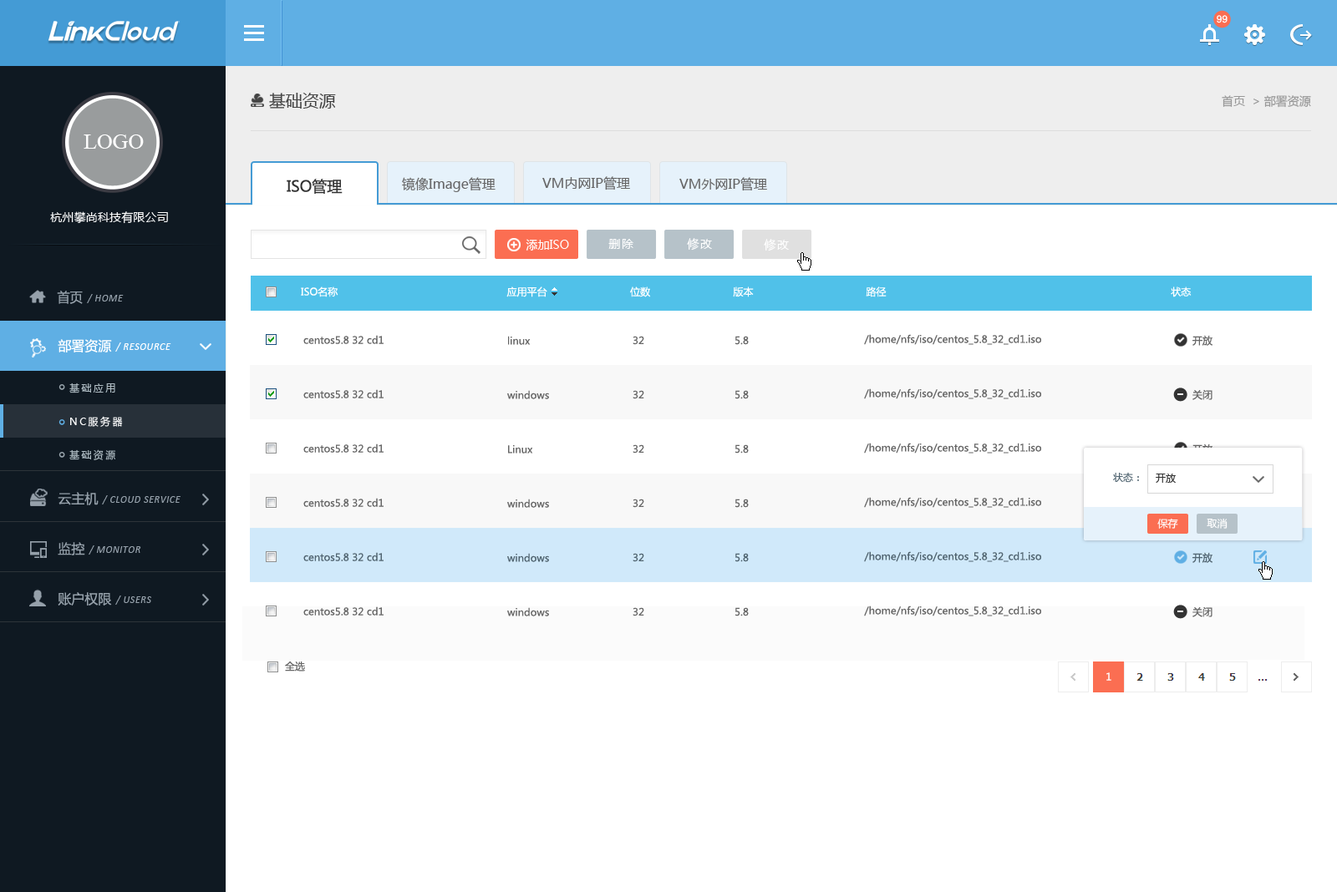
<style>
.page{position:relative;width:1337px;height:892px;background:#ffffff}
.page>*{position:absolute;margin:0}
.t1{font:10px "ArialMT";color:#ffffff}
.t2{font:16.7px "MicrosoftYaHei";color:#444444}
.t3{font:11.7px "MicrosoftYaHei";color:#999999}
.t4{font:21.7px "TimesNewRomanPSMT";color:#ffffff}
.t5{font:15px "MicrosoftYaHei";color:#333333}
.t6{font:13.4px "MicrosoftYaHei";color:#666666}
.t7{font:11.7px "MicrosoftYaHei";letter-spacing:0.01em;color:#ffffff}
.t8{font:11.7px "MicrosoftYaHei";color:#ffffff}
.t9{font:11.7px "MicrosoftYaHei";letter-spacing:0.1em;color:#ffffff}
.t10{font:13.4px "MicrosoftYaHei";color:#95a0aa;scale:0.96 1}
.t11{font:10px "MicrosoftYaHei";color:#ffffff}
.t12{font:10px "Calibri-Italic";letter-spacing:0.05em;color:#95a0aa}
.t13{font:13.4px "MicrosoftYaHei";color:#ffffff}
.t14{font:10px "MicrosoftYaHei";color:#666666}
.t15{font:10px "Calibri-Italic";letter-spacing:0.05em;text-transform:uppercase}
.t16{font:10px "Calibri-Italic";letter-spacing:0.05em}
.t17{font:10px "Calibri-Italic";letter-spacing:0.05em;color:#ffffff;text-transform:uppercase}
.t18{font:10px "Calibri-Italic";letter-spacing:0.05em;color:#ffffff}
.t19{font:10px/33.4px "MicrosoftYaHei";letter-spacing:0.2em;color:#ffffff}
.t20{font:10px/33.4px "MicrosoftYaHei";letter-spacing:0.2em;color:#b0bdc4}
.t21{font:10px "MicrosoftYaHei"}
.t22{font:10px "MicrosoftYaHei";color:#506470}
.t23{font:10px "MicrosoftYaHei";color:#333333}
.t24{font:13.4px "MicrosoftYaHei";color:#95a0aa}
.t25{font:10px "Calibri-Italic";letter-spacing:0.05em;color:#95a0aa;text-transform:uppercase}
.t26{font:10px "MicrosoftYaHei";color:#fffefe}
</style>
<div class="page">
<p class="t1" style="left:1216px;top:15px;width:11px;height:8px">99</p>
<p class="t2" style="left:269px;top:93px;width:67px;height:16px">基础资源</p>
<p class="t3" style="left:1221px;top:95px;width:90px;height:13px">首页  &gt; 部署资源</p>
<p class="t4" style="left:84px;top:134px;width:60px;height:15px">LOGO</p>
<p class="t5" style="left:287px;top:179px;width:55px;height:15px">ISO管理</p>
<p class="t6" style="left:402px;top:177px;width:93px;height:15px">镜像Image管理</p>
<p class="t6" style="left:542px;top:176px;width:88px;height:14px">VM内网IP管理</p>
<p class="t6" style="left:679px;top:177px;width:88px;height:14px">VM外网IP管理</p>
<p class="t7" style="left:50px;top:211px;width:118px;height:13px">杭州攀尚科技有限公司</p>
<p class="t8" style="left:525px;top:239px;width:44px;height:12px">添加ISO</p>
<p class="t9" style="left:608px;top:239px;width:25px;height:10px">删除</p>
<p class="t9" style="left:687px;top:238px;width:25px;height:13px">修改</p>
<p class="t9" style="left:764px;top:239px;width:25px;height:12px">修改</p>
<p class="t10" style="left:57px;top:291px;width:26px;height:13px">首页</p>
<p class="t11" style="left:301px;top:287px;width:890px;height:10px">ISO名称                                                         应用平台                            位数                            版本                                      路径                                                                                                状态</p>
<p class="t12" style="left:87px;top:294px;width:37px;height:9px">/ HOME</p>
<p class="t13" style="left:58px;top:339px;width:54px;height:14px">部署资源</p>
<p class="t14" style="left:303px;top:335px;width:80px;height:9px">centos5.8 32 cd1</p>
<p class="t14" style="left:508px;top:336px;width:22px;height:9px">linux</p>
<p class="t14" style="left:632px;top:336px;width:12px;height:9px">32</p>
<p class="t14" style="left:735px;top:336px;width:13px;height:9px">5.8</p>
<p class="t14" style="left:864px;top:334px;width:177px;height:11px">/home/nfs/iso/centos_5.8_32_cd1.iso</p>
<p class="t14" style="left:1192px;top:335px;width:20px;height:11px">开放</p>
<p class="t15" style="left:115px;top:343px;width:56px;height:10px"><span class="t16">/ </span>resource</p>
<p class="t17" style="left:115px;top:342px;width:56px;height:10px"><span class="t18">/ </span>resource</p>
<p class="t19" style="left:69px;top:383px;width:54px;height:77px"><span class="t20">基础应用<br></span>NC服务器<br><span class="t20">基础资源</span></p>
<p class="t14" style="left:303px;top:389px;width:80px;height:9px">centos5.8 32 cd1</p>
<p class="t14" style="left:864px;top:388px;width:177px;height:11px">/home/nfs/iso/centos_5.8_32_cd1.iso</p>
<p class="t14" style="left:1192px;top:389px;width:20px;height:11px">关闭</p>
<p class="t14" style="left:507px;top:390px;width:42px;height:9px">windows</p>
<p class="t14" style="left:632px;top:390px;width:12px;height:9px">32</p>
<p class="t14" style="left:735px;top:390px;width:13px;height:9px">5.8</p>
<p class="t14" style="left:303px;top:444px;width:80px;height:9px">centos5.8 32 cd1</p>
<p class="t14" style="left:508px;top:445px;width:25px;height:9px">Linux</p>
<p class="t14" style="left:632px;top:444px;width:12px;height:10px">32</p>
<p class="t14" style="left:735px;top:444px;width:13px;height:10px">5.8</p>
<p class="t14" style="left:864px;top:443px;width:177px;height:11px">/home/nfs/iso/centos_5.8_32_cd1.iso</p>
<p class="t21" style="left:1192px;top:444px;width:20px;height:10px">开放</p>
<p class="t22" style="left:1113px;top:472px;width:26px;height:11px">状态：</p>
<p class="t23" style="left:1155px;top:474px;width:20px;height:9px">开放</p>
<p class="t24" style="left:58px;top:492px;width:41px;height:13px">云主机</p>
<p class="t25" style="left:102px;top:495px;width:78px;height:10px"><span class="t12">/ </span>cloud service</p>
<p class="t14" style="left:303px;top:498px;width:80px;height:9px">centos5.8 32 cd1</p>
<p class="t14" style="left:864px;top:497px;width:177px;height:11px">/home/nfs/iso/centos_5.8_32_cd1.iso</p>
<p class="t14" style="left:507px;top:499px;width:42px;height:9px">windows</p>
<p class="t14" style="left:632px;top:499px;width:12px;height:9px">32</p>
<p class="t14" style="left:735px;top:499px;width:13px;height:9px">5.8</p>
<p class="t11" style="left:1157px;top:518px;width:21px;height:11px">保存</p>
<p class="t11" style="left:1206px;top:518px;width:21px;height:11px">取消</p>
<p class="t24" style="left:58px;top:542px;width:27px;height:14px">监控</p>
<p class="t25" style="left:89px;top:545px;width:52px;height:10px"><span class="t12">/ </span>monitor</p>
<p class="t22" style="left:303px;top:552px;width:80px;height:9px">centos5.8 32 cd1</p>
<p class="t22" style="left:507px;top:553px;width:42px;height:9px">windows</p>
<p class="t22" style="left:632px;top:553px;width:12px;height:9px">32</p>
<p class="t22" style="left:735px;top:553px;width:13px;height:9px">5.8</p>
<p class="t22" style="left:864px;top:551px;width:177px;height:11px">/home/nfs/iso/centos_5.8_32_cd1.iso</p>
<p class="t22" style="left:1192px;top:552px;width:20px;height:11px">开放</p>
<p class="t24" style="left:58px;top:592px;width:54px;height:14px">账户权限</p>
<p class="t25" style="left:115px;top:596px;width:36px;height:9px"><span class="t12">/ </span>users</p>
<p class="t14" style="left:864px;top:606px;width:177px;height:10px">/home/nfs/iso/centos_5.8_32_cd1.iso</p>
<p class="t14" style="left:303px;top:606px;width:80px;height:10px">centos5.8 32 cd1</p>
<p class="t14" style="left:507px;top:607px;width:42px;height:9px">windows</p>
<p class="t14" style="left:632px;top:607px;width:12px;height:9px">32</p>
<p class="t14" style="left:735px;top:607px;width:13px;height:9px">5.8</p>
<p class="t14" style="left:1192px;top:606px;width:20px;height:11px">关闭</p>
<p class="t14" style="left:285px;top:662px;width:20px;height:10px">全选</p>
<p class="t26" style="left:1106px;top:672px;width:5px;height:9px">1</p>
</div>
